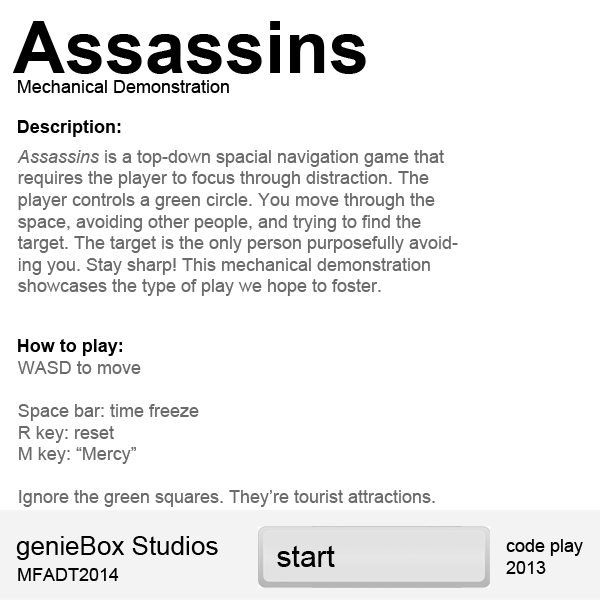
<style>
.page{position:relative;width:600px;height:600px;background:#ffffff}
.page>*{position:absolute;margin:0}
.t1{font:72px "Arial-BoldMT";color:#000000}
.t2{font:18px "ArialMT";color:#000000}
.t3{font:18px "Arial-BoldMT";color:#000000}
.t4{font:18px "ArialMT";color:#6a6a6a}
.t5{font:18px "Arial-ItalicMT";color:#6a6a6a}
.t6{font:26px "ArialMT";color:#000000}
.t7{font:30px "ArialMT";color:#000000}
</style>
<div class="page">
<p class="t1" style="left:13px;top:21px;width:353px;height:53px">Assassins</p>
<p class="t2" style="left:18px;top:80px;width:211px;height:13px">Mechanical Demonstration</p>
<p class="t3" style="left:18px;top:120px;width:103px;height:17px">Description:</p>
<p class="t4" style="left:17px;top:150px;width:441px;height:146px"><span class="t5">Assassins </span>is a top-down spacial navigation game that requires the player to focus through distraction. The player controls a green circle. You move through the space, avoiding other people, and trying to find the target. The target is the only person purposefully avoiding you. Stay sharp! This mechanical demonstration showcases the type of play we hope to foster.</p>
<p class="t3" style="left:18px;top:339px;width:104px;height:17px">How to play:</p>
<p class="t4" style="left:18px;top:361px;width:417px;height:146px">WASD to move<br><br>Space bar: time freeze<br>R key: reset<br>M key: “Mercy”<br><br>Ignore the green squares. They’re tourist attractions.</p>
<p class="t6" style="left:16px;top:536px;width:202px;height:24px">genieBox Studios</p>
<p class="t7" style="left:277px;top:545px;width:58px;height:22px">start</p>
<p class="t2" style="left:506px;top:539px;width:77px;height:35px">code play<br>2013</p>
<p class="t2" style="left:18px;top:568px;width:101px;height:13px">MFADT2014</p>
</div>
